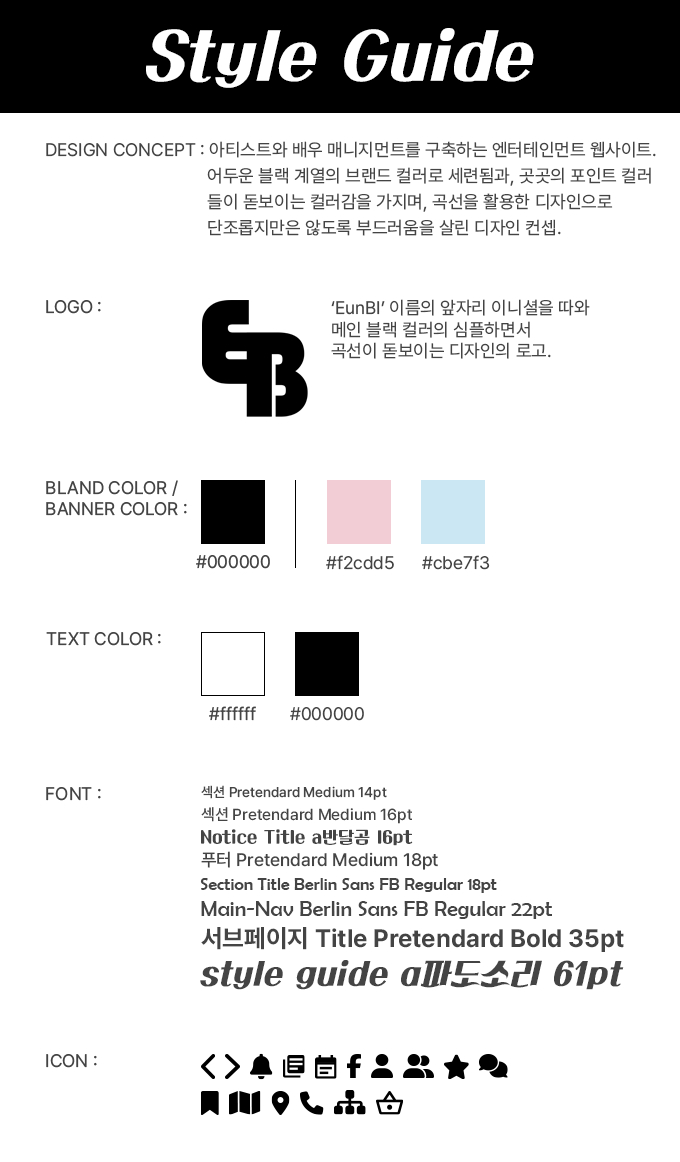
<style>
.page{position:relative;width:680px;height:1162px;background:#ffffff}
.page>*{position:absolute;margin:0}
.t1{font:61px "KoreanPDSR-R";color:#ffffff}
.t2{font:18px/26px "Pretendard-Regular";color:#444444}
.t3{font:18px "Pretendard-Regular";color:#444444}
.t4{font:14px "Pretendard-Medium";color:#444444}
.t5{font:16px "Pretendard-Medium";color:#444444}
.t6{font:16px "KoreanBDG-R";color:#444444}
.t7{font:18px "Pretendard-Medium";color:#444444}
.t8{font:18px "BerlinSansFB-Reg";color:#444444}
.t9{font:22px "BerlinSansFB-Reg";color:#444444}
.t10{font:25px "Pretendard-Bold";color:#444444}
.t11{font:30px "KoreanPDSR-R";color:#444444}
</style>
<div class="page">
<p class="t1" style="left:146px;top:28px;width:388px;height:60px">Style Guide</p>
<p class="t2" style="left:46px;top:141px;width:610px;height:95px"><span class="t3">DESIGN CONCEPT : </span>아티스트와 배우 매니지먼트를 구축하는 엔터테인먼트 웹사이트.<br>                                    어두운 블랙 계열의 브랜드 컬러로 세련됨과, 곳곳의 포인트 컬러<br>                                    들이 돋보이는 컬러감을 가지며, 곡선을 활용한 디자인으로<br>                                    단조롭지만은 않도록 부드러움을 살린 디자인 컨셉..</p>
<p class="t3" style="left:46px;top:300px;width:55px;height:14px">LOGO :</p>
<p class="t3" style="left:331px;top:299px;width:259px;height:60px">‘EunBI’ 이름의 앞자리 이니셜을 따와<br>메인 블랙 컬러의 심플하면서 <br>곡선이 돋보이는 디자인의 로고.</p>
<p class="t3" style="left:46px;top:480px;width:141px;height:36px">BLAND COLOR /<br>BANNER COLOR :</p>
<p class="t3" style="left:196px;top:555px;width:74px;height:14px">#000000</p>
<p class="t3" style="left:326px;top:555px;width:68px;height:15px">#f2cdd5</p>
<p class="t3" style="left:422px;top:555px;width:68px;height:15px">#cbe7f3</p>
<p class="t3" style="left:46px;top:632px;width:115px;height:14px">TEXT COLOR :</p>
<p class="t3" style="left:209px;top:706px;width:47px;height:15px">#ffffff</p>
<p class="t3" style="left:290px;top:707px;width:74px;height:14px">#000000</p>
<p class="t4" style="left:201px;top:785px;width:186px;height:15px">섹션 Pretendard Medium 14pt</p>
<p class="t3" style="left:46px;top:787px;width:55px;height:14px">FONT :</p>
<p class="t5" style="left:201px;top:807px;width:211px;height:17px">섹션 Pretendard Medium 16pt</p>
<p class="t6" style="left:201px;top:829px;width:212px;height:17px">Notice Title a반달곰 16pt</p>
<p class="t7" style="left:201px;top:851px;width:237px;height:19px">푸터 Pretendard Medium 18pt</p>
<p class="t8" style="left:200px;top:878px;width:297px;height:15px">Section Title Berlin Sans FB Regular 18pt</p>
<p class="t9" style="left:201px;top:901px;width:351px;height:18px">Main-Nav Berlin Sans FB Regular 22pt</p>
<p class="t10" style="left:201px;top:927px;width:423px;height:25px">서브페이지 Title Pretendard Bold 35pt</p>
<p class="t11" style="left:200px;top:960px;width:424px;height:30px">style guide a파도소리 61pt</p>
<p class="t3" style="left:46px;top:1054px;width:51px;height:14px">ICON :</p>
</div>
